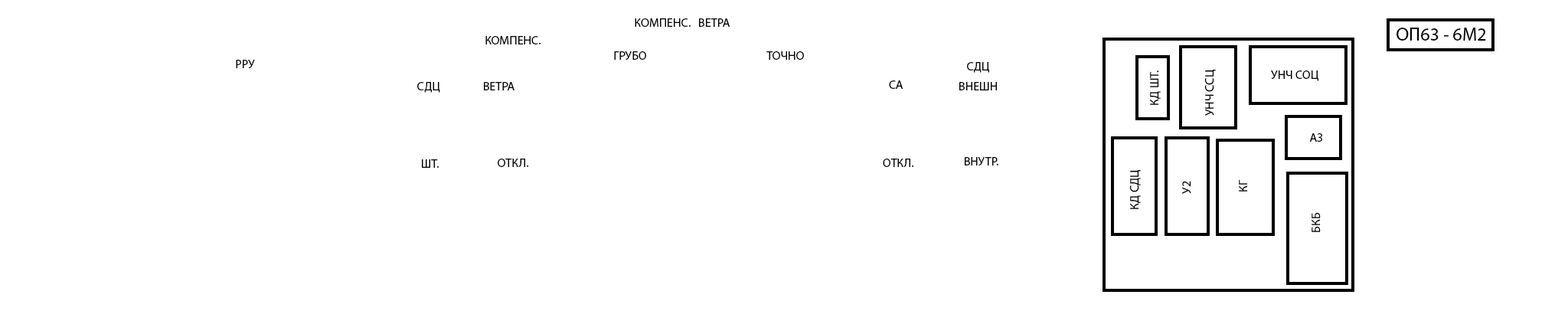
<style>
.page{position:relative;width:1568px;height:334px;background:#ffffff}
.page>*{position:absolute;margin:0}
.t1{font:12.2px "MyriadPro-Regular";color:#000000}
.t2{font:18.4px "MyriadPro-Regular";color:#000000}
.t3{font:12.2px/10.2px "MyriadPro-Regular";color:#000000}
.t4{font:12.3px "MyriadPro-Regular";color:#000000}
</style>
<div class="page">
<p class="t1" style="left:635px;top:18px;width:95px;height:9px">КОМПЕНС.   ВЕТРА</p>
<p class="t2" style="left:1396px;top:28px;width:90px;height:13px">ОП63 - 6М2</p>
<p class="t1" style="left:485px;top:36px;width:56px;height:8px">КОМПЕНС.</p>
<p class="t1" style="left:614px;top:51px;width:32px;height:9px">ГРУБО</p>
<p class="t1" style="left:766px;top:51px;width:38px;height:9px">ТОЧНО</p>
<p class="t1" style="left:236px;top:60px;width:19px;height:8px">РРУ</p>
<p class="t3" style="left:959px;top:62px;width:38px;height:28px">СДЦ<br><br>ВНЕШН</p>
<p class="t4" style="left:1150px;top:70px;width:11px;height:35px;rotate:-90deg">КД ШТ.</p>
<p class="t4" style="left:1204px;top:70px;width:12px;height:46px;rotate:-90deg">УНЧ ССЦ</p>
<p class="t1" style="left:1271px;top:70px;width:47px;height:11px">УНЧ СОЦ</p>
<p class="t1" style="left:417px;top:82px;width:23px;height:11px">СДЦ</p>
<p class="t1" style="left:484px;top:82px;width:30px;height:8px">ВЕТРА</p>
<p class="t1" style="left:889px;top:80px;width:14px;height:9px">СА</p>
<p class="t1" style="left:1309px;top:133px;width:13px;height:9px">АЗ</p>
<p class="t1" style="left:422px;top:159px;width:17px;height:9px">ШТ.</p>
<p class="t1" style="left:498px;top:158px;width:31px;height:9px">ОТКЛ.</p>
<p class="t1" style="left:883px;top:158px;width:31px;height:9px">ОТКЛ.</p>
<p class="t1" style="left:965px;top:157px;width:33px;height:8px">ВНУТР.</p>
<p class="t4" style="left:1129px;top:170px;width:12px;height:39px;rotate:-90deg">КД СДЦ</p>
<p class="t4" style="left:1182px;top:181px;width:9px;height:13px;rotate:-90deg">У2</p>
<p class="t4" style="left:1239px;top:179px;width:9px;height:12px;rotate:-90deg">КГ</p>
<p class="t4" style="left:1312px;top:212px;width:9px;height:20px;rotate:-90deg">БКБ</p>
</div>
